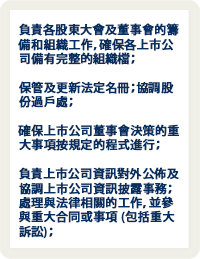
<style>
.page{position:relative;width:200px;height:259px;background:#ffffff}
.page>*{position:absolute;margin:0}
.t1{font:12px "KozGoPr6N-Medium";letter-spacing:0.005em;color:#052f61;font-weight:bold}
</style>
<div class="page">
<p class="t1" style="left:18px;top:23px;width:161px;height:216px">負責各股東大會及董事會的籌備和組織工作，確保各上市公司備有完整的組織檔；<br><br>保管及更新法定名冊；協調股份過戶處；<br><br>確保上市公司董事會決策的重大事項按規定的程式進行；<br><br>負責上市公司資訊對外公佈及協調上市公司資訊披露事務；<br>處理與法律相關的工作，並參與重大合同或事項 (包括重大訴訟)；</p>
</div>
